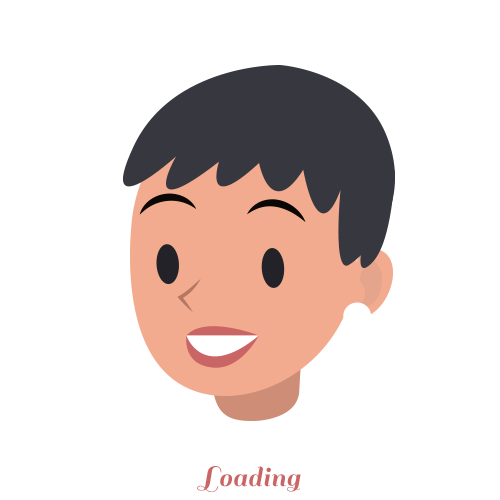
<style>
.page{position:relative;width:500px;height:500px;background:#ffffff}
.page>*{position:absolute;margin:0}
.t1{font:30px "Sail-Regular";letter-spacing:0.02em;color:#c96565}
</style>
<div class="page">
<p class="t1" style="left:197px;top:466px;width:104px;height:26px">Loading</p>
</div>
